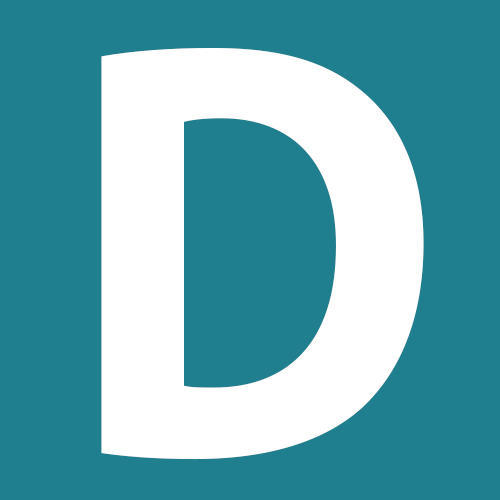
<style>
.page{position:relative;width:500px;height:500px;background:#1f7f8e}
.page>*{position:absolute;margin:0}
.t1{font:600px "MyriadPro-Bold";color:#ffffff;scale:0.9 1}
</style>
<div class="page">
<p class="t1" style="left:101px;top:47px;width:323px;height:413px">D</p>
</div>
